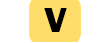
<style>
.page{position:relative;width:108px;height:43px;background:#ffffff}
.page>*{position:absolute;margin:0}
.t1{font:36px "FranklinGothic-Heavy";color:#000000}
</style>
<div class="page">
<p class="t1" style="left:44px;top:8px;width:23px;height:24px">V</p>
</div>
